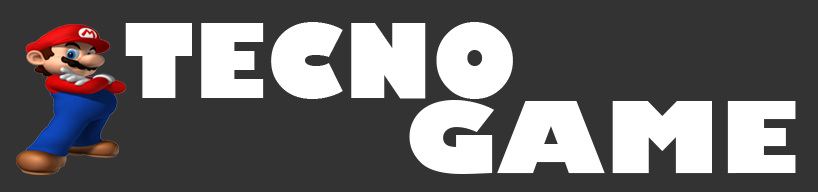
<style>
.page{position:relative;width:818px;height:192px;background:#333333}
.page>*{position:absolute;margin:0}
.t1{font:100px "GillSans-UltraBold";color:#ffffff}
.t2{font:97.4px "GillSans-UltraBold";color:#ffffff;scale:1.12 1}
</style>
<div class="page">
<p class="t1" style="left:125px;top:22px;width:388px;height:77px">TECNO</p>
<p class="t2" style="left:409px;top:100px;width:387px;height:74px">GAME</p>
</div>
